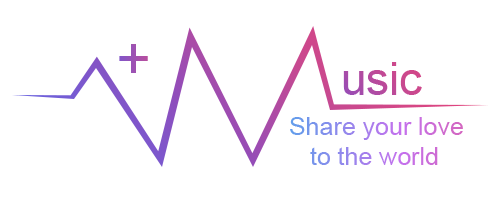
<style>
.page{position:relative;width:500px;height:200px;background:#ffffff}
.page>*{position:absolute;margin:0}
.t1{font:60px "ArialMT";color:#9d52b3}
.t2{font:46px "ArialMT";color:#ba4a9a}
.t3{font:25px "ArialMT"}
</style>
<div class="page">
<p class="t1" style="left:119px;top:44px;width:29px;height:29px">+</p>
<p class="t2" style="left:343px;top:62px;width:79px;height:33px">usic</p>
<p class="t3" style="left:290px;top:117px;width:173px;height:48px">Share your love <br>   to the world</p>
</div>
